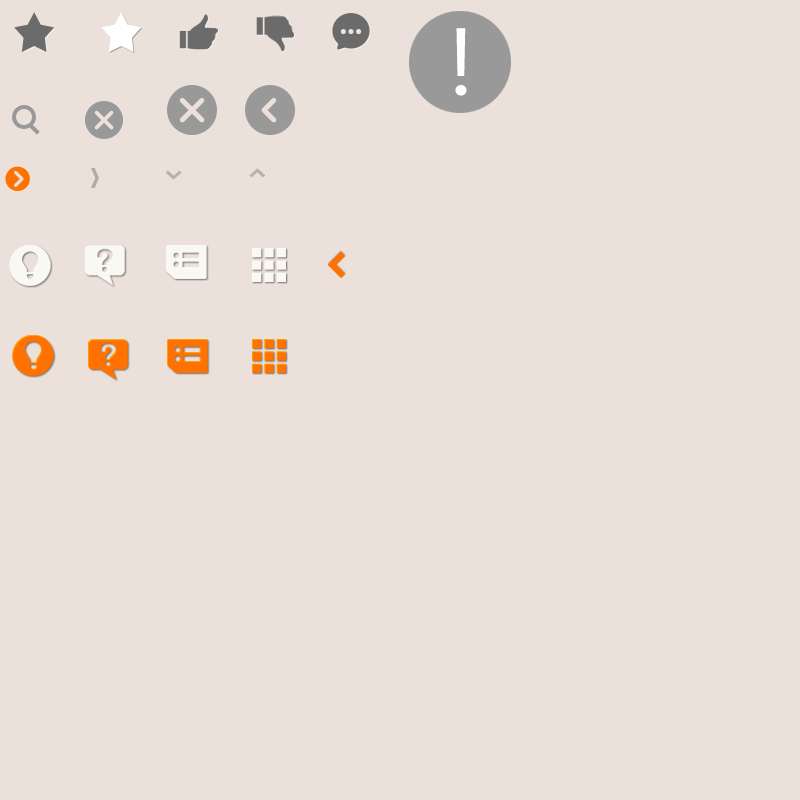
<style>
.page{position:relative;width:800px;height:800px;background:#ece0da}
.page>*{position:absolute;margin:0}
.t1{font:87.7px "MicrosoftYaHei";color:#ffffff}
</style>
<div class="page">
<p class="t1" style="left:455px;top:28px;width:12px;height:68px">!</p>
</div>
